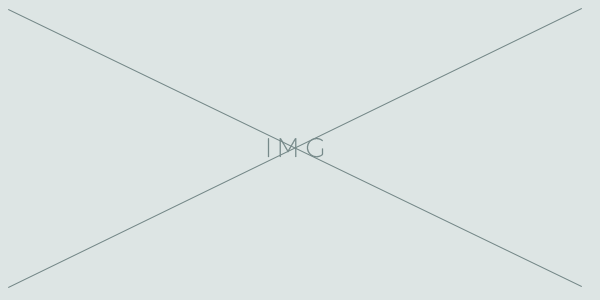
<style>
.page{position:relative;width:600px;height:300px;background:#dde5e4}
.page>*{position:absolute;margin:0}
.t1{font:24px "CaviarDreams";letter-spacing:0.3em;color:#758989}
</style>
<div class="page">
<p class="t1" style="left:267px;top:137px;width:57px;height:21px">IMG</p>
</div>
